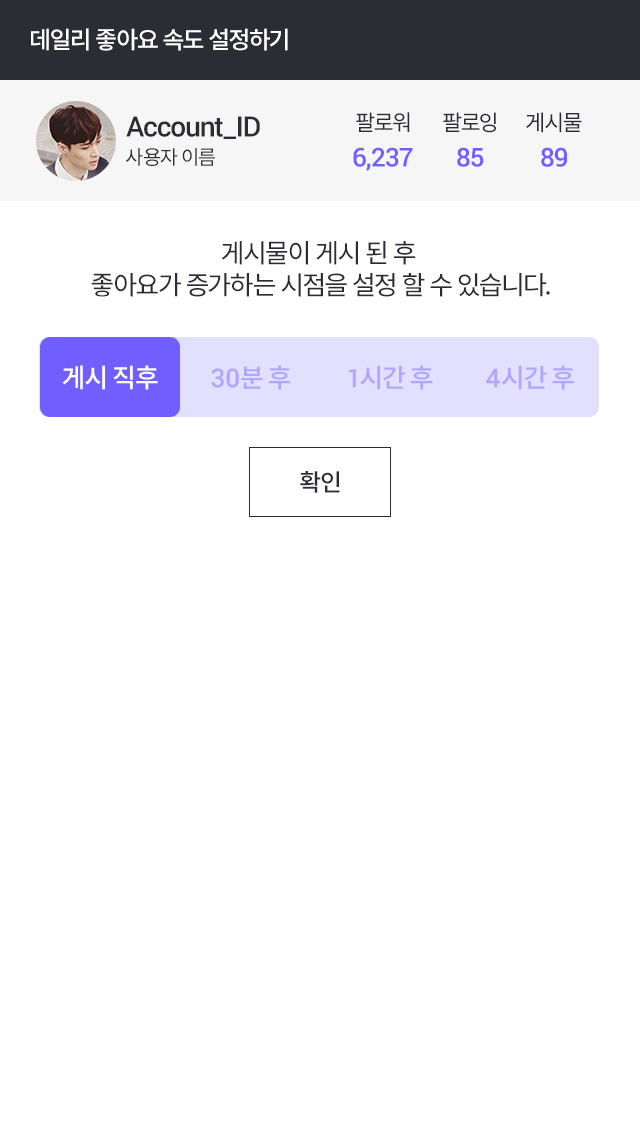
<style>
.page{position:relative;width:640px;height:1136px;background:#ffffff}
.page>*{position:absolute;margin:0}
.t1{font:24px "NotoSansCJKkr-Medium";letter-spacing:-0.04em;color:#ffffff}
.t2{font:22px "NotoSansCJKkr-Regular";letter-spacing:-0.04em;color:#2b2c34}
.t3{font:28px "Roboto-Medium";letter-spacing:-0.04em;color:#2b2c34}
.t4{font:20px "NotoSansCJKkr-Regular";letter-spacing:-0.04em;color:#2b2c34}
.t5{font:26px "Roboto-Medium";letter-spacing:-0.04em;color:#715eff}
.t6{font:26px/32px "NotoSansCJKkr-Regular";letter-spacing:-0.04em;color:#2b2c34}
.t7{font:26px "NotoSansCJKkr-Medium";letter-spacing:-0.04em;color:#ffffff}
.t8{font:26px "NotoSansCJKkr-Medium";letter-spacing:-0.04em;color:#b0a6ff}
.t9{font:26px "Roboto-Medium";color:#b0a6ff}
.t10{font:24px "NotoSansCJKkr-Medium";letter-spacing:-0.04em;color:#2b2c34}
</style>
<div class="page">
<p class="t1" style="left:31px;top:28px;width:257px;height:23px">데일리 좋아요 속도 설정하기</p>
<p class="t2" style="left:356px;top:112px;width:54px;height:20px">팔로워</p>
<p class="t2" style="left:443px;top:112px;width:53px;height:21px">팔로잉</p>
<p class="t2" style="left:526px;top:112px;width:56px;height:21px">게시물</p>
<p class="t3" style="left:126px;top:116px;width:134px;height:23px">Account_ID</p>
<p class="t4" style="left:126px;top:148px;width:89px;height:18px">사용자 이름</p>
<p class="t5" style="left:353px;top:147px;width:60px;height:24px">6,237</p>
<p class="t5" style="left:457px;top:147px;width:27px;height:20px">85</p>
<p class="t5" style="left:541px;top:147px;width:26px;height:20px">89</p>
<p class="t6" style="left:91px;top:241px;width:459px;height:56px;text-align:center">게시물이 게시 된 후 <br>좋아요가 증가하는 시점을 설정 할 수 있습니다.</p>
<p class="t7" style="left:62px;top:365px;width:96px;height:25px">게시 직후</p>
<p class="t8" style="left:211px;top:365px;width:80px;height:25px"><span class="t9">30</span>분 후</p>
<p class="t8" style="left:349px;top:365px;width:84px;height:25px"><span class="t9">1</span>시간 후</p>
<p class="t8" style="left:486px;top:365px;width:88px;height:25px"><span class="t9">4</span>시간 후</p>
<p class="t10" style="left:300px;top:471px;width:40px;height:22px">확인</p>
</div>
